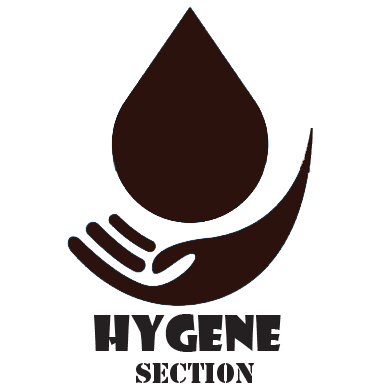
<style>
.page{position:relative;width:386px;height:385px;background:#ffffff}
.page>*{position:absolute;margin:0}
.t1{font:26.6px "StencilStd";color:#241f20}
.t2{font:48.2px "ShowcardGothic-Reg";color:#241f20}
</style>
<div class="page">
<p class="t1" style="left:94px;top:314px;width:187px;height:69px"><span class="t2">Hygene<br>      </span>Section</p>
</div>
